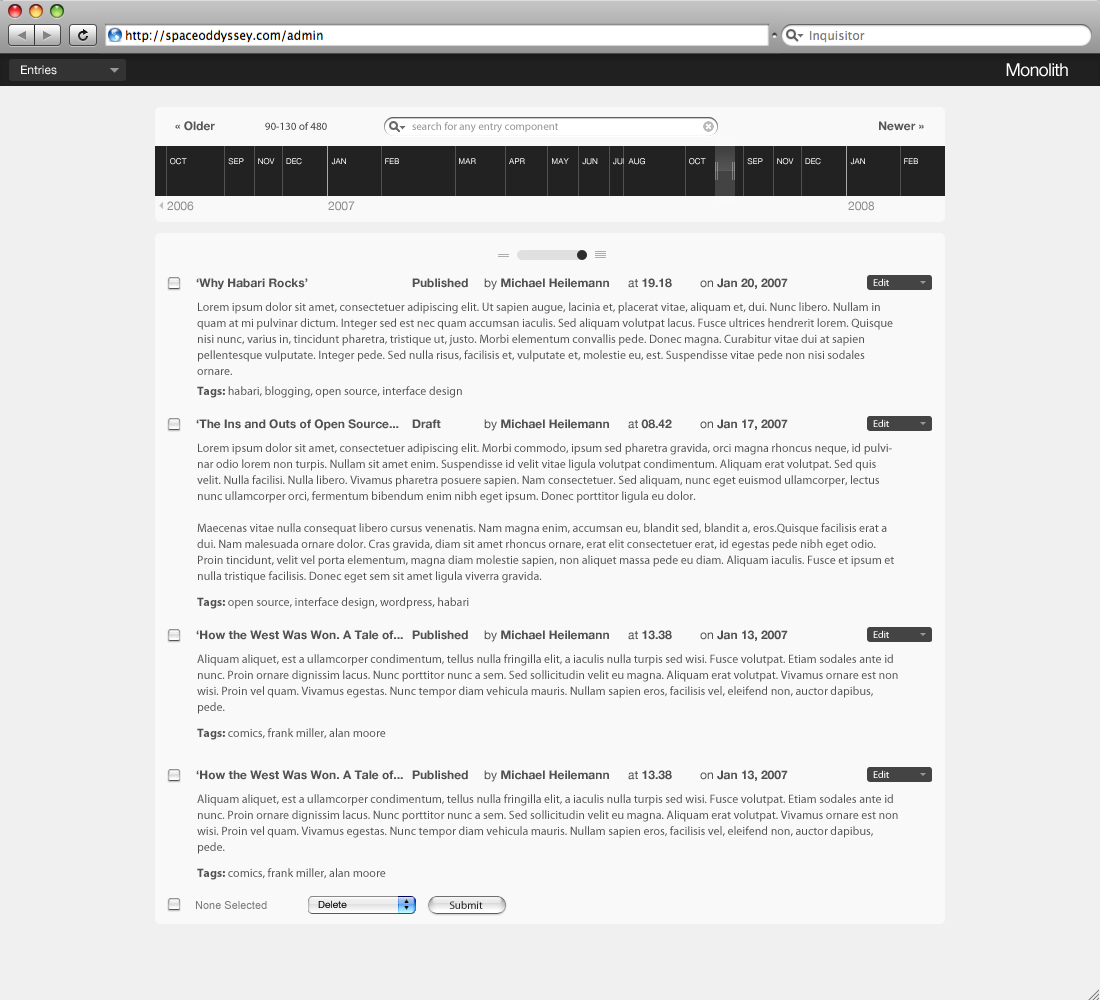
<style>
.page{position:relative;width:1100px;height:1000px;background:#f9f9f9}
.page>*{position:absolute;margin:0}
.t1{font:12px "HelveticaNeue";color:#ffffff}
.t2{font:18px "HelveticaNeue";letter-spacing:-0.05em;color:#ffffff}
.t3{font:12px "HelveticaNeue-Bold";color:#444444}
.t4{font:11px "MyriadPro-Regular";color:#444444}
.t5{font:11px "MyriadPro-Regular";color:#949494}
.t6{font:12px "HelveticaNeue";color:#898989}
.t7{font:12px "HelveticaNeue-Bold";color:#525151}
.t8{font:12px "HelveticaNeue";color:#525151}
.t9{font:10px "MyriadPro-Regular";color:#ffffff}
.t10{font:12px/16px "MyriadPro-Regular";color:#525151}
.t11{font:12px "MyriadPro-Regular";color:#525151}
.t12{font:12px "MyriadPro-Bold";color:#525151}
.t13{font:11px "ArialMT";color:#797979}
.t14{font:10px "HelveticaNeue";color:#000000}
.t15{font:11px "MyriadPro-Regular";color:#242424}
</style>
<div class="page">
<p class="t1" style="left:21px;top:65px;width:36px;height:10px">Entries</p>
<p class="t2" style="left:1006px;top:63px;width:62px;height:14px">Monolith</p>
<p class="t3" style="left:175px;top:121px;width:40px;height:10px;opacity:0.9">« Older</p>
<p class="t4" style="left:265px;top:122px;width:62px;height:8px">90-130 of 480</p>
<p class="t5" style="left:412px;top:122px;width:146px;height:11px">search for any entry component</p>
<p class="t3" style="left:879px;top:121px;width:45px;height:10px;opacity:0.9">Newer »</p>
<p class="t6" style="left:167px;top:201px;width:27px;height:10px">2006</p>
<p class="t6" style="left:328px;top:201px;width:27px;height:10px">2007</p>
<p class="t6" style="left:848px;top:201px;width:26px;height:10px">2008</p>
<p class="t7" style="left:196px;top:278px;width:592px;height:12px">‘Why Habari Rocks’   Published <span class="t8">by </span>Michael Heilemann <span class="t8">at </span>19.18 <span class="t8">on </span>Jan 20, 2007</p>
<p class="t9" style="left:873px;top:278px;width:16px;height:8px">Edit</p>
<p class="t10" style="left:197px;top:302px;width:696px;height:73px">Lorem ipsum dolor sit amet, consectetuer adipiscing elit. Ut sapien augue, lacinia et, placerat vitae, aliquam et, dui. Nunc libero. Nullam in quam at mi pulvinar dictum. Integer sed est nec quam accumsan iaculis. Sed aliquam volutpat lacus. Fusce ultrices hendrerit lorem. Quisque nisi nunc, varius in, tincidunt pharetra, tristique ut, justo. Morbi elementum convallis pede. Donec magna. Curabitur vitae dui at sapien pellentesque vulputate. Integer pede. Sed nulla risus, facilisis et, vulputate et, molestie eu, est. Suspendisse vitae pede non nisi sodales ornare.</p>
<p class="t11" style="left:197px;top:386px;width:265px;height:12px"><span class="t12">Tags: </span>habari, blogging, open source, interface design</p>
<p class="t7" style="left:196px;top:419px;width:592px;height:12px">‘The Ins and Outs of Open Source... Draft  <span class="t8">by </span>Michael Heilemann <span class="t8">at </span>08.42 <span class="t8">on </span>Jan 17, 2007</p>
<p class="t9" style="left:873px;top:419px;width:16px;height:8px">Edit</p>
<p class="t10" style="left:197px;top:443px;width:697px;height:140px">Lorem ipsum dolor sit amet, consectetuer adipiscing elit. Morbi commodo, ipsum sed pharetra gravida, orci magna rhoncus neque, id pulvinar odio lorem non turpis. Nullam sit amet enim. Suspendisse id velit vitae ligula volutpat condimentum. Aliquam erat volutpat. Sed quis velit. Nulla facilisi. Nulla libero. Vivamus pharetra posuere sapien. Nam consectetuer. Sed aliquam, nunc eget euismod ullamcorper, lectus nunc ullamcorper orci, fermentum bibendum enim nibh eget ipsum. Donec porttitor ligula eu dolor.<br><br>Maecenas vitae nulla consequat libero cursus venenatis. Nam magna enim, accumsan eu, blandit sed, blandit a, eros.Quisque facilisis erat a dui. Nam malesuada ornare dolor. Cras gravida, diam sit amet rhoncus ornare, erat elit consectetuer erat, id egestas pede nibh eget odio. Proin tincidunt, velit vel porta elementum, magna diam molestie sapien, non aliquet massa pede eu diam. Aliquam iaculis. Fusce et ipsum et nulla tristique facilisis. Donec eget sem sit amet ligula viverra gravida.</p>
<p class="t11" style="left:197px;top:597px;width:272px;height:12px"><span class="t12">Tags: </span>open source, interface design, wordpress, habari</p>
<p class="t7" style="left:196px;top:630px;width:592px;height:12px">‘How the West Was Won. A Tale of... Published <span class="t8">by </span>Michael Heilemann <span class="t8">at </span>13.38 <span class="t8">on </span>Jan 13, 2007</p>
<p class="t9" style="left:873px;top:630px;width:16px;height:8px">Edit</p>
<p class="t10" style="left:197px;top:654px;width:701px;height:60px">Aliquam aliquet, est a ullamcorper condimentum, tellus nulla fringilla elit, a iaculis nulla turpis sed wisi. Fusce volutpat. Etiam sodales ante id nunc. Proin ornare dignissim lacus. Nunc porttitor nunc a sem. Sed sollicitudin velit eu magna. Aliquam erat volutpat. Vivamus ornare est non wisi. Proin vel quam. Vivamus egestas. Nunc tempor diam vehicula mauris. Nullam sapien eros, facilisis vel, eleifend non, auctor dapibus, pede.</p>
<p class="t11" style="left:197px;top:728px;width:189px;height:12px"><span class="t12">Tags: </span>comics, frank miller, alan moore</p>
<p class="t7" style="left:196px;top:770px;width:592px;height:12px">‘How the West Was Won. A Tale of... Published <span class="t8">by </span>Michael Heilemann <span class="t8">at </span>13.38 <span class="t8">on </span>Jan 13, 2007</p>
<p class="t9" style="left:873px;top:770px;width:16px;height:8px">Edit</p>
<p class="t10" style="left:197px;top:794px;width:701px;height:60px">Aliquam aliquet, est a ullamcorper condimentum, tellus nulla fringilla elit, a iaculis nulla turpis sed wisi. Fusce volutpat. Etiam sodales ante id nunc. Proin ornare dignissim lacus. Nunc porttitor nunc a sem. Sed sollicitudin velit eu magna. Aliquam erat volutpat. Vivamus ornare est non wisi. Proin vel quam. Vivamus egestas. Nunc tempor diam vehicula mauris. Nullam sapien eros, facilisis vel, eleifend non, auctor dapibus, pede.</p>
<p class="t11" style="left:197px;top:868px;width:189px;height:12px"><span class="t12">Tags: </span>comics, frank miller, alan moore</p>
<p class="t13" style="left:196px;top:901px;width:71px;height:8px">None Selected</p>
<p class="t14" style="left:318px;top:900px;width:29px;height:8px">Delete</p>
<p class="t15" style="left:449px;top:901px;width:34px;height:8px">Submit</p>
</div>
